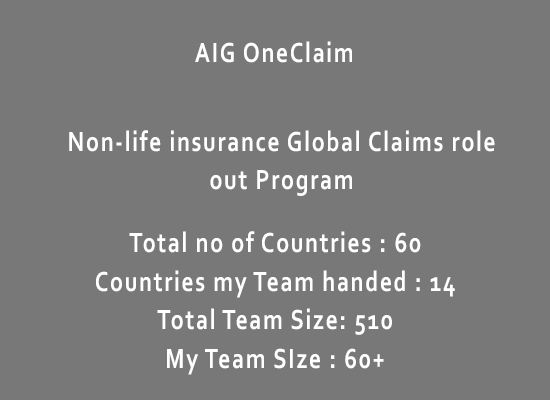
<style>
.page{position:relative;width:550px;height:400px;background:#787878}
.page>*{position:absolute;margin:0}
.t1{font:29px "Corbel-Bold";letter-spacing:0.075em;color:#ffffff;scale:0.8 1}
.t2{font:29px/38.6px "Corbel-Bold";letter-spacing:0.075em;color:#ffffff;scale:0.8 1}
</style>
<div class="page">
<p class="t1" style="left:195px;top:41px;width:157px;height:22px">AIG OneClaim</p>
<p class="t2" style="left:69px;top:130px;width:426px;height:66px;text-align:center">Non-life insurance Global Claims role out Program</p>
<p class="t2" style="left:96px;top:231px;width:359px;height:144px;text-align:center">Total no of Countries : 60<br>Countries my Team handed : 14<br>Total Team Size: 510<br>My Team SIze : 60+</p>
</div>
